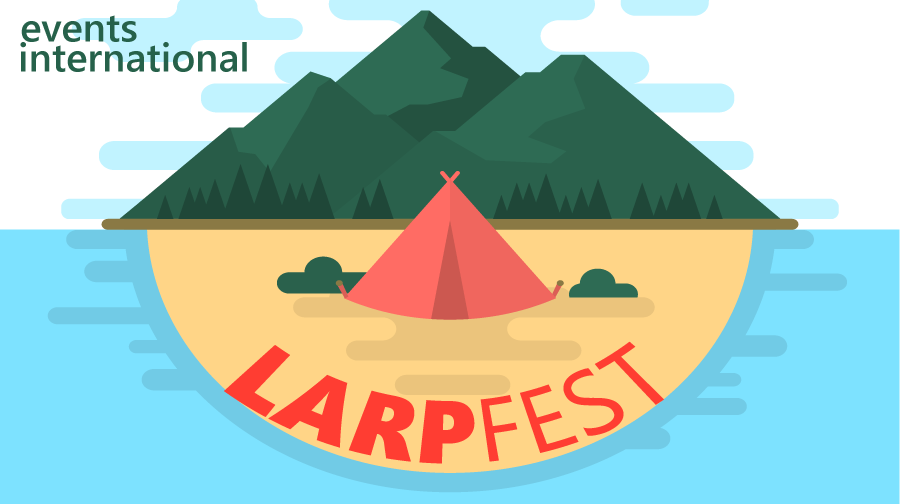
<style>
.page{position:relative;width:900px;height:504px;background:#7de2ff}
.page>*{position:absolute;margin:0}
.t1{font:40px "SegoeUI-Semibold";color:#26614a}
.t2{font:80px "SegoeUIBlack";letter-spacing:0.002em;color:#ff3d32}
.t3{font:80px "SegoeUI";letter-spacing:0.002em;color:#ff3d32}
</style>
<div class="page">
<p class="t1" style="left:21px;top:15px;width:116px;height:27px">events</p>
<p class="t1" style="left:20px;top:42px;width:227px;height:30px">international</p>
<p class="t2" style="left:224px;top:341px;width:440px;height:123px">LARP<span class="t3">FEST</span></p>
</div>
